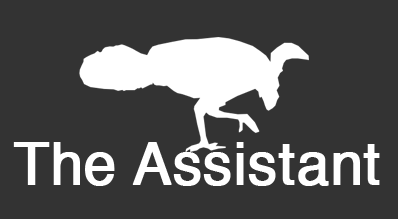
<style>
.page{position:relative;width:398px;height:219px;background:#333333}
.page>*{position:absolute;margin:0}
.t1{font:58px "Helvetica";color:#ffffff;font-weight:bold}
</style>
<div class="page">
<p class="t1" style="left:13px;top:142px;width:367px;height:44px">The Assistant</p>
</div>
